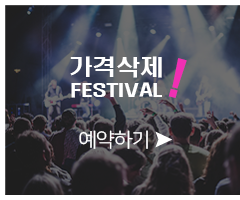
<style>
.page{position:relative;width:240px;height:200px}
.page>*{position:absolute;margin:0}
.t1{font:21.9px "H2hdrM";letter-spacing:-0.01em;color:#ffffff;scale:1.1 1}
.t2{font:46.3px "H2hdrM";letter-spacing:-0.01em;color:#f02fb3;text-transform:uppercase;scale:1.1 1}
.t3{font:16.4px "H2hdrM";letter-spacing:-0.01em;color:#ffffff;text-transform:uppercase;scale:1.48 1}
.t4{font:19.8px "NanumSquare_acR";letter-spacing:-0.01em;color:#ffffff;scale:1.05 1}
</style>
<div class="page">
<p class="t1" style="left:70px;top:56px;width:92px;height:22px">가격삭제</p>
<p class="t2" style="left:168px;top:58px;width:19px;height:40px;rotate:15deg">!</p>
<p class="t3" style="left:71px;top:82px;width:91px;height:16px">Festival</p>
<p class="t4" style="left:79px;top:130px;width:69px;height:19px">예약하기</p>
</div>
